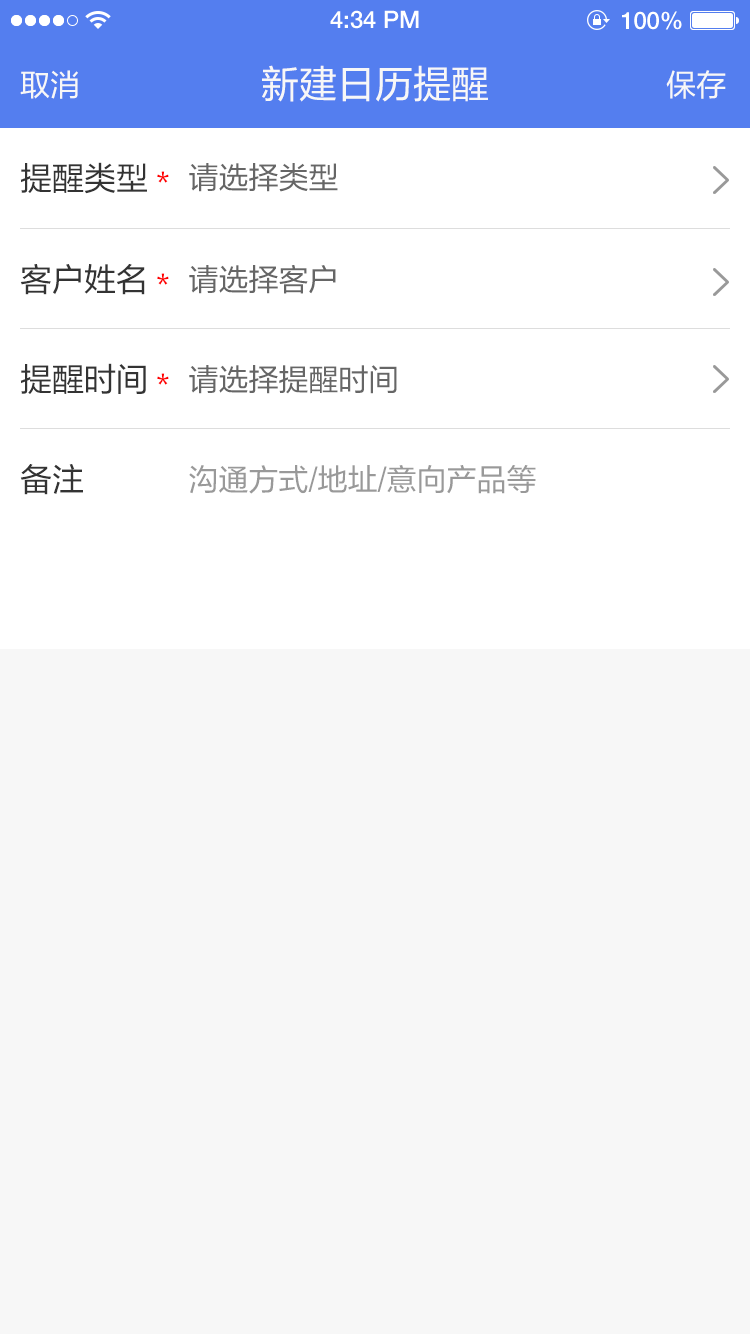
<style>
.page{position:relative;width:750px;height:1334px;background:#f7f7f7}
.page>*{position:absolute;margin:0}
.t1{font:24px "HelveticaNeueLTPro-Md";color:#ffffff}
.t2{font:38px "FZLTHJW-GB1-0";color:#f7f7f7}
.t3{font:30px "FZLTHJW-GB1-0";color:#f7f7f7}
.t4{font:32px "FZLTHJW-GB1-0";color:#333333}
.t5{font:30px "FZLTHJW-GB1-0";color:#ff0000}
.t6{font:30px "FZLTHJW-GB1-0";color:#666666}
.t7{font:30px "FZLTHJW-GB1-0";color:#999999}
</style>
<div class="page">
<p class="t1" style="left:330px;top:10px;width:89px;height:19px">4:34 PM</p>
<p class="t1" style="left:622px;top:11px;width:60px;height:19px">100%</p>
<p class="t2" style="left:262px;top:65px;width:226px;height:37px">新建日历提醒</p>
<p class="t3" style="left:20px;top:70px;width:58px;height:29px">取消</p>
<p class="t3" style="left:666px;top:70px;width:60px;height:29px">保存</p>
<p class="t4" style="left:20px;top:162px;width:127px;height:32px">提醒类型</p>
<p class="t5" style="left:157px;top:171px;width:12px;height:12px">*</p>
<p class="t6" style="left:189px;top:163px;width:149px;height:29px">请选择类型</p>
<p class="t4" style="left:20px;top:264px;width:125px;height:31px">客户姓名</p>
<p class="t6" style="left:189px;top:265px;width:147px;height:29px">请选择客户</p>
<p class="t5" style="left:157px;top:273px;width:12px;height:12px">*</p>
<p class="t4" style="left:20px;top:363px;width:126px;height:31px">提醒时间</p>
<p class="t6" style="left:189px;top:365px;width:208px;height:29px">请选择提醒时间</p>
<p class="t5" style="left:157px;top:373px;width:12px;height:12px">*</p>
<p class="t4" style="left:20px;top:464px;width:63px;height:31px">备注</p>
<p class="t7" style="left:189px;top:465px;width:347px;height:29px">沟通方式/地址/意向产品等</p>
</div>
